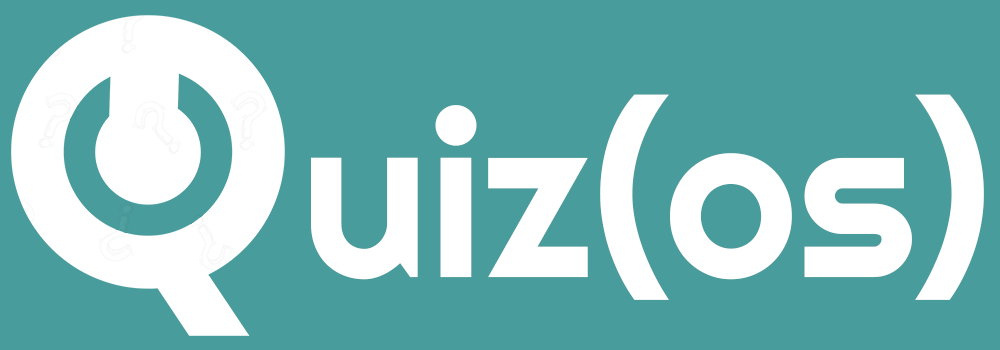
<style>
.page{position:relative;width:1000px;height:350px;background:#499c9c}
.page>*{position:absolute;margin:0}
.t1{font:228.1px "Righteous-Regular";color:#ffffff}
</style>
<div class="page">
<p class="t1" style="left:311px;top:94px;width:673px;height:206px">uiz(os)</p>
</div>
